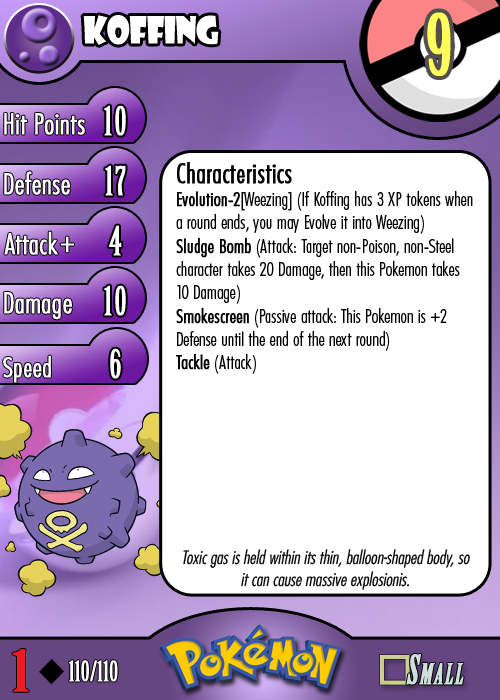
<style>
.page{position:relative;width:500px;height:700px;background:#ffffff}
.page>*{position:absolute;margin:0}
.t1{font:36.7px "ShowcardGothic-Reg";letter-spacing:-0.025em;color:#ffffff;scale:0.91 1}
.t2{font:83.3px "BirchStd";letter-spacing:0.025em;color:#fffd59;font-weight:bold}
.t3{font:27.8px "Futura-CondensedLight";color:#ffffff;font-weight:bold}
.t4{font:38.9px "BirchStd";letter-spacing:0.035em;color:#ffffff;font-weight:bold}
.t5{font:19.4px "FuturaCondensedBQ-Light";color:#010101}
.t6{font:27.8px "FuturaCondensedBQ-Light";color:#010101;font-weight:bold}
.t7{font:19.4px "FuturaCondensedBQ-Light";color:#010101;font-weight:bold}
.t8{font:30.6px "Futura-CondensedLight";color:#ffffff;font-weight:bold}
.t9{font:27.8px "FuturaCondensedBQ-Light";color:#ffffff;font-weight:bold}
.t10{font:18.1px "Futura-CondensedLight";color:#010101;font-style:italic}
.t11{font:55.6px "BirchStd";color:#ed1c24;font-weight:bold;scale:1.5 1}
.t12{font:27.8px "BirchStd";color:#ffffff;font-weight:bold}
</style>
<div class="page">
<p class="t1" style="left:83px;top:15px;width:136px;height:30px">koffing</p>
<p class="t2" style="left:427px;top:12px;width:24px;height:64px">9</p>
<p class="t3" style="left:4px;top:113px;width:81px;height:22px">Hit Points</p>
<p class="t4" style="left:104px;top:105px;width:22px;height:31px">10</p>
<p class="t3" style="left:4px;top:171px;width:66px;height:24px">Defense</p>
<p class="t4" style="left:105px;top:165px;width:21px;height:31px">17</p>
<p class="t5" style="left:176px;top:162px;width:297px;height:212px"><span class="t6">Characteristics<br></span><span class="t7">Evolution-2</span>[Weezing] (If Koffing has 3 XP tokens when a round ends, you may Evolve it into Weezing)<br><span class="t7">Sludge Bomb</span> (Attack: Target non-Poison, non-Steel character takes 20 Damage, then this Pokemon takes 10 Damage)<br><span class="t7">Smokescreen</span> (Passive attack: This Pokemon is +2 Defense until the end of the next round)<br><span class="t7">Tackle</span> (Attack)</p>
<p class="t3" style="left:4px;top:231px;width:54px;height:24px">Attack</p>
<p class="t4" style="left:109px;top:225px;width:13px;height:31px">4</p>
<p class="t8" style="left:60px;top:236px;width:14px;height:17px">+</p>
<p class="t3" style="left:4px;top:292px;width:68px;height:28px">Damage</p>
<p class="t4" style="left:104px;top:285px;width:22px;height:31px">10</p>
<p class="t4" style="left:110px;top:348px;width:11px;height:31px">6</p>
<p class="t9" style="left:3px;top:355px;width:48px;height:28px">Speed</p>
<p class="t10" style="left:183px;top:549px;width:287px;height:41px;text-align:center">Toxic gas is held within its thin, balloon-shaped body, so it can cause massive explosionis.</p>
<p class="t11" style="left:12px;top:649px;width:17px;height:43px">1</p>
<p class="t12" style="left:68px;top:660px;width:50px;height:22px">110/110</p>
</div>
